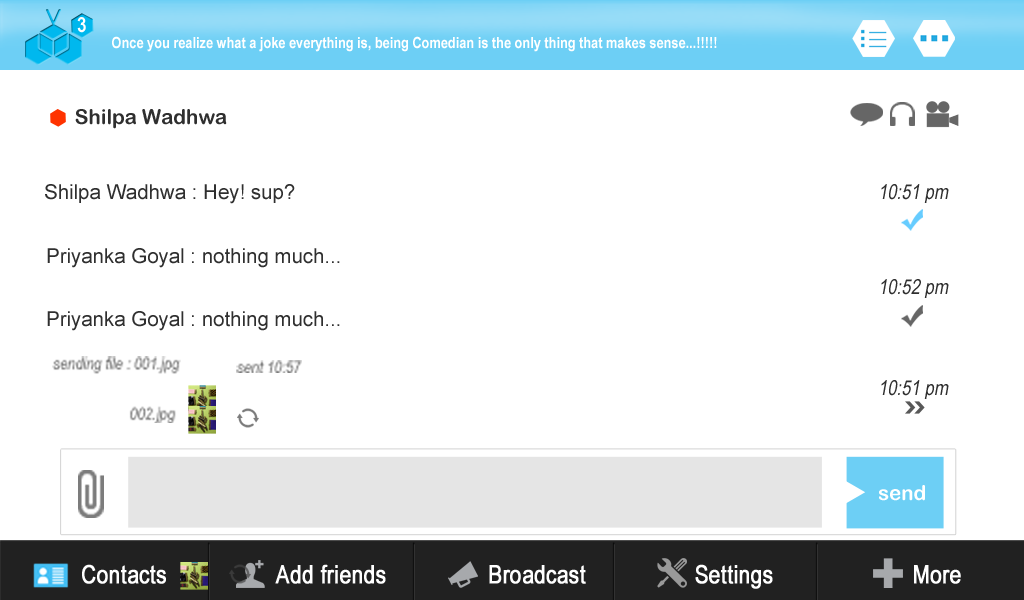
<style>
.page{position:relative;width:1024px;height:600px;background:#ffffff}
.page>*{position:absolute;margin:0}
.t1{font:20.8px "ArialNarrow-Bold";color:#ffffff}
.t2{font:15.6px "ArialNarrow-Bold";color:#ffffff}
.t3{font:20.4px "ArialRoundedMTBold";color:#2f2f2f}
.t4{font:20.4px "ArialMT";color:#2f2f2f}
.t5{font:20.4px "ArialNarrow";color:#2f2f2f;font-style:italic}
.t6{font:16.8px/26px "ArialNarrow-Italic";color:#737373}
.t7{font:16.8px "ArialNarrow-Italic";color:#737373}
.t8{font:20.4px "ArialRoundedMTBold";color:#ffffff}
.t9{font:24.9px "ArialNarrow";color:#ffffff;font-weight:bold}
</style>
<div class="page">
<p class="t1" style="left:77px;top:17px;width:9px;height:16px">3</p>
<p class="t2" style="left:112px;top:36px;width:605px;height:16px">Once you realize what a joke everything is, being Comedian is the only thing that makes sense...!!!!!</p>
<p class="t3" style="left:75px;top:109px;width:152px;height:20px">Shilpa Wadhwa</p>
<p class="t4" style="left:45px;top:184px;width:250px;height:20px">Shilpa Wadhwa : Hey! sup?</p>
<p class="t5" style="left:881px;top:184px;width:68px;height:19px">10:51 pm</p>
<p class="t4" style="left:47px;top:248px;width:293px;height:20px">Priyanka Goyal : nothing much...</p>
<p class="t5" style="left:881px;top:279px;width:68px;height:19px">10:52 pm</p>
<p class="t4" style="left:47px;top:311px;width:293px;height:20px">Priyanka Goyal : nothing much...</p>
<p class="t6" style="left:52px;top:356px;width:129px;height:67px">sending file : 001.jpg<br>                    <br>                    002.jpg</p>
<p class="t7" style="left:236px;top:360px;width:66px;height:13px">sent 10:57</p>
<p class="t5" style="left:881px;top:380px;width:68px;height:19px">10:51 pm</p>
<p class="t8" style="left:879px;top:485px;width:46px;height:16px">send</p>
<p class="t9" style="left:82px;top:564px;width:84px;height:20px">Contacts</p>
<p class="t9" style="left:275px;top:564px;width:111px;height:20px">Add friends</p>
<p class="t9" style="left:489px;top:565px;width:97px;height:19px">Broadcast</p>
<p class="t9" style="left:695px;top:564px;width:78px;height:25px">Settings</p>
<p class="t9" style="left:914px;top:565px;width:47px;height:19px">More</p>
</div>
